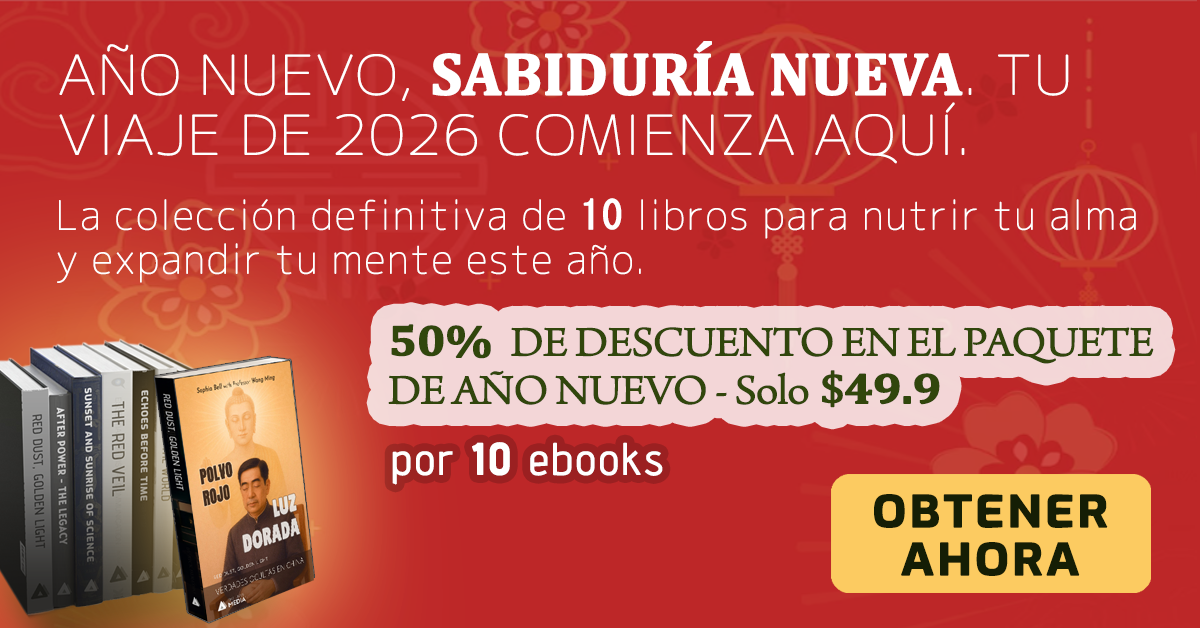
<style>
.page{position:relative;width:1200px;height:628px;background:#bd2728}
.page>*{position:absolute;margin:0}
.t1{font:54px/60px "Chogokuboso-Gothic";letter-spacing:-0.005em;color:#ffffff;font-weight:bold;scale:1.11 1}
.t2{font:60px/60px "Cambria-Bold";letter-spacing:-0.005em;color:#ffffff;font-weight:bold}
.t3{font:39.6px/44px "Chogokuboso-Gothic";letter-spacing:0.025em;color:#ffffff;font-weight:bold}
.t4{font:39.6px/44px "MS-Gothic";letter-spacing:0.025em;color:#ffffff;font-weight:bold}
.t5{font:43.2px/48px "ArnoPro-LightDisplay";letter-spacing:-0.025em;color:#31460c;font-weight:bold;scale:1.11 1}
.t6{font:43.2px/48px "Cambria-Bold";letter-spacing:-0.025em;color:#31460c;font-weight:bold;scale:1.11 1}
.t7{font:43.2px/48px "Cambria";letter-spacing:-0.025em;color:#31460c;font-weight:bold;scale:1.11 1}
.t8{font:44px "AdventPro-Regular";letter-spacing:0.05em;color:#ffffff;font-weight:bold}
.t9{font:44px "AdventPro-Bold";letter-spacing:0.05em;color:#ffffff;font-weight:bold}
.t10{font:43.2px/48px "Exo-Bold";letter-spacing:0.05em;color:#151e05;font-weight:bold;scale:1.11 1}
</style>
<div class="page">
<p class="t1" style="left:59px;top:41px;width:1010px;height:123px">AÑO NUEVO, <span class="t2">SABIDURÍA NUEVA</span>. TU VIAJE DE 2026 COMIENZA AQUÍ.</p>
<p class="t3" style="left:57px;top:198px;width:1079px;height:85px">La colección definitiva de <span class="t4">10</span> libros para nutrir tu alma <br>y expandir tu mente este año.</p>
<p class="t5" style="left:388px;top:324px;width:766px;height:84px"><span class="t6">50% </span> DE DESCUENTO EN EL PAQUETE DE AÑO NUEVO - Solo<span class="t7"> $</span><span class="t6">49.9</span></p>
<p class="t8" style="left:392px;top:442px;width:271px;height:43px">por <span class="t9">10</span> ebooks</p>
<p class="t10" style="left:874px;top:494px;width:234px;height:82px;text-align:center">OBTENER AHORA</p>
</div>
